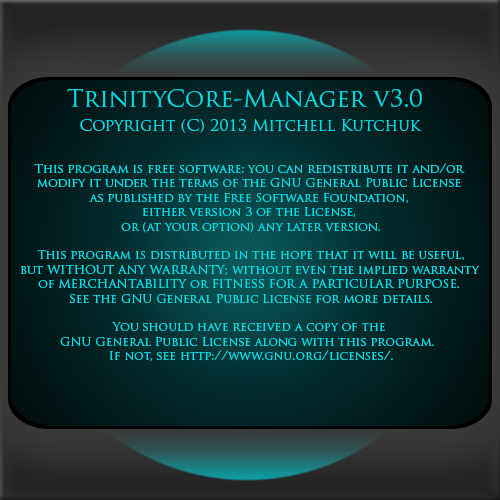
<style>
.page{position:relative;width:500px;height:500px}
.page>*{position:absolute;margin:0}
.t1{font:24px "TrajanPro-Regular";color:#00dbe3}
.t2{font:16px "TrajanPro-Regular";color:#00dbe3}
.t3{font:12px "TrajanPro-Regular";color:#00dbe3}
</style>
<div class="page">
<p class="t1" style="left:67px;top:88px;width:355px;height:19px">TrinityCore-Manager v3.0</p>
<p class="t2" style="left:80px;top:119px;width:342px;height:14px">Copyright (C) 2013 Mitchell Kutchuk</p>
<p class="t3" style="left:21px;top:163px;width:459px;height:198px;text-align:center">This program is free software: you can redistribute it and/or <br>modify it under the terms of the GNU General Public License <br>as published by the Free Software Foundation, <br>either version 3 of the License, <br>or (at your option) any later version.<br><br>This program is distributed in the hope that it will be useful,<br>but WITHOUT ANY WARRANTY; without even the implied warranty <br>of MERCHANTABILITY or FITNESS FOR A PARTICULAR PURPOSE. <br>See the GNU General Public License for more details.<br><br>You should have received a copy of the <br>GNU General Public License along with this program.  <br>If not, see http://www.gnu.org/licenses/.</p>
</div>
